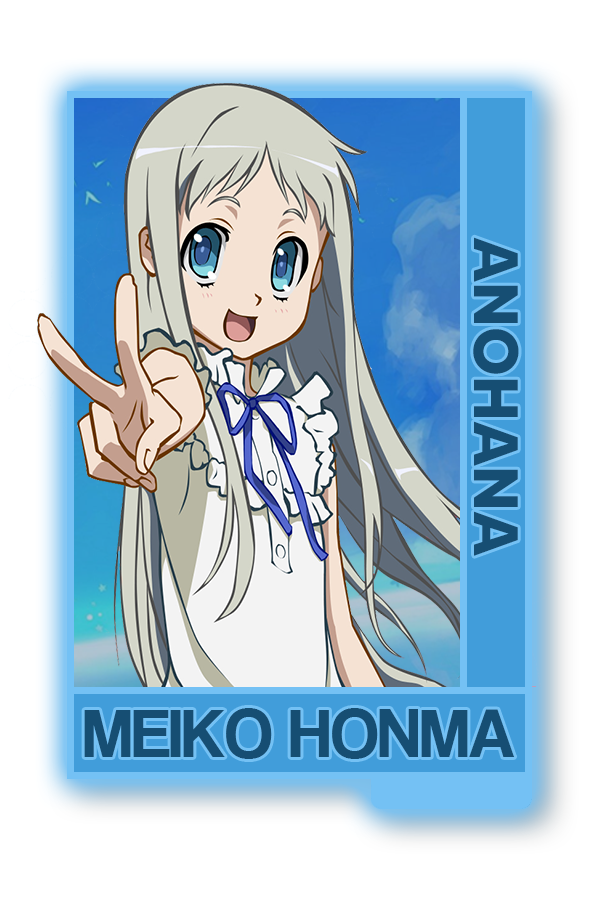
<style>
.page{position:relative;width:600px;height:900px;background:#ffffff}
.page>*{position:absolute;margin:0}
.t1{font:62.6px "MADETOMMY-Bold";color:#164e73}
.t2{font:70.5px "CoolveticaRg-Regular";color:#164e73}
</style>
<div class="page">
<p class="t1" style="left:473px;top:237px;width:46px;height:319px;rotate:90deg">ANOHANA</p>
<p class="t2" style="left:84px;top:708px;width:431px;height:51px">MEIKO HONMA</p>
</div>
